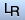
<style>
.page{position:relative;width:25px;height:20px}
.page>*{position:absolute;margin:0}
.t1{font:14px "HelveticaNeue";color:#000000}
</style>
<div class="page">
<p class="t1" style="left:5px;top:3px;width:7px;height:10px">L</p>
<p class="t1" style="left:11px;top:6px;width:9px;height:10px">R</p>
</div>
